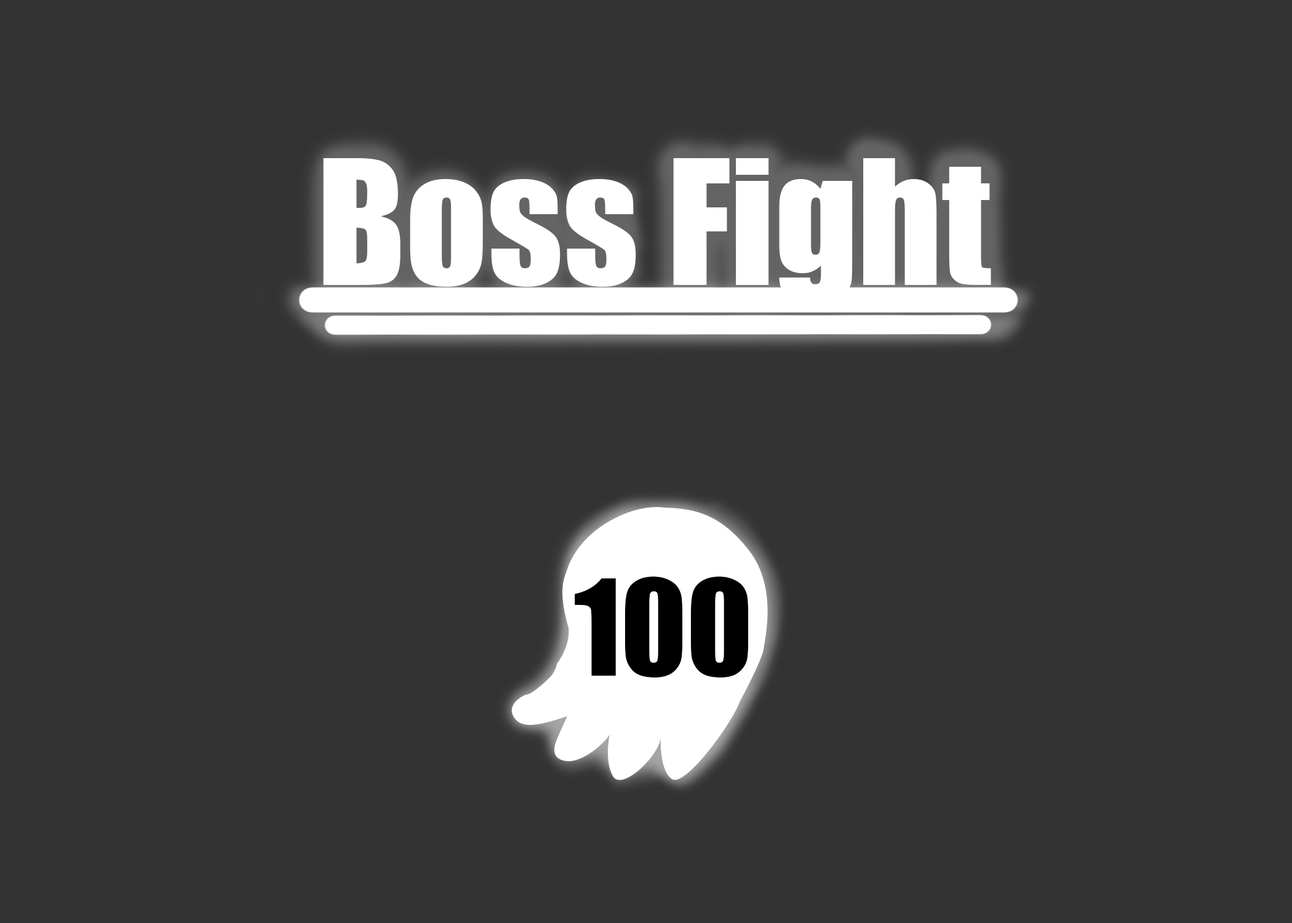
<style>
.page{position:relative;width:1292px;height:923px;background:#333333}
.page>*{position:absolute;margin:0}
.t1{font:160.5px "Impact";color:#ffffff}
.t2{font:123.1px "Impact";color:#000000}
</style>
<div class="page">
<p class="t1" style="left:323px;top:158px;width:668px;height:145px">Boss Fight</p>
<p class="t2" style="left:575px;top:577px;width:174px;height:100px">100</p>
</div>
